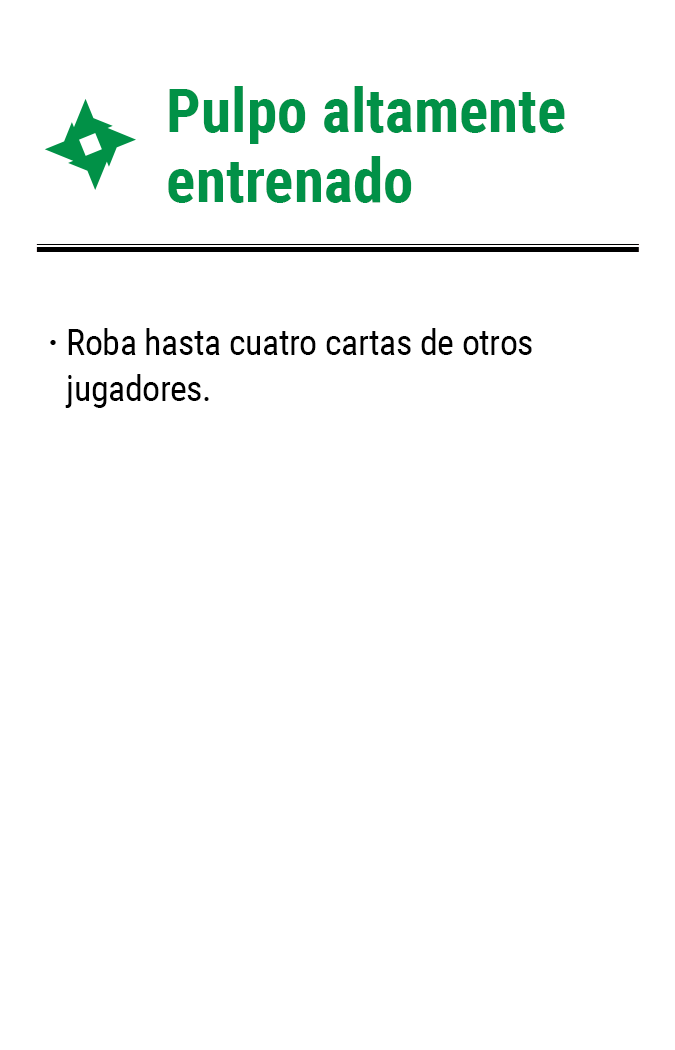
<style>
.page{position:relative;width:675px;height:1050px;background:#ffffff}
.page>*{position:absolute;margin:0}
.t1{font:61.2px/62.9px "RobotoCondensed-Bold";color:#019147}
.t2{font:35.8px/45.8px "RobotoCondensed-Regular";letter-spacing:-0.01em;color:#000000}
.t3{font:35.8px "RobotoCondensed-Bold";letter-spacing:-0.01em;color:#000000}
</style>
<div class="page">
<p class="t1" style="left:168px;top:86px;width:397px;height:117px">Pulpo altamente<br>entrenado</p>
<p class="t2" style="left:65px;top:328px;width:467px;height:80px">Roba hasta cuatro cartas de otros jugadores.</p>
<p class="t3" style="left:50px;top:340px;width:6px;height:5px">·</p>
</div>
